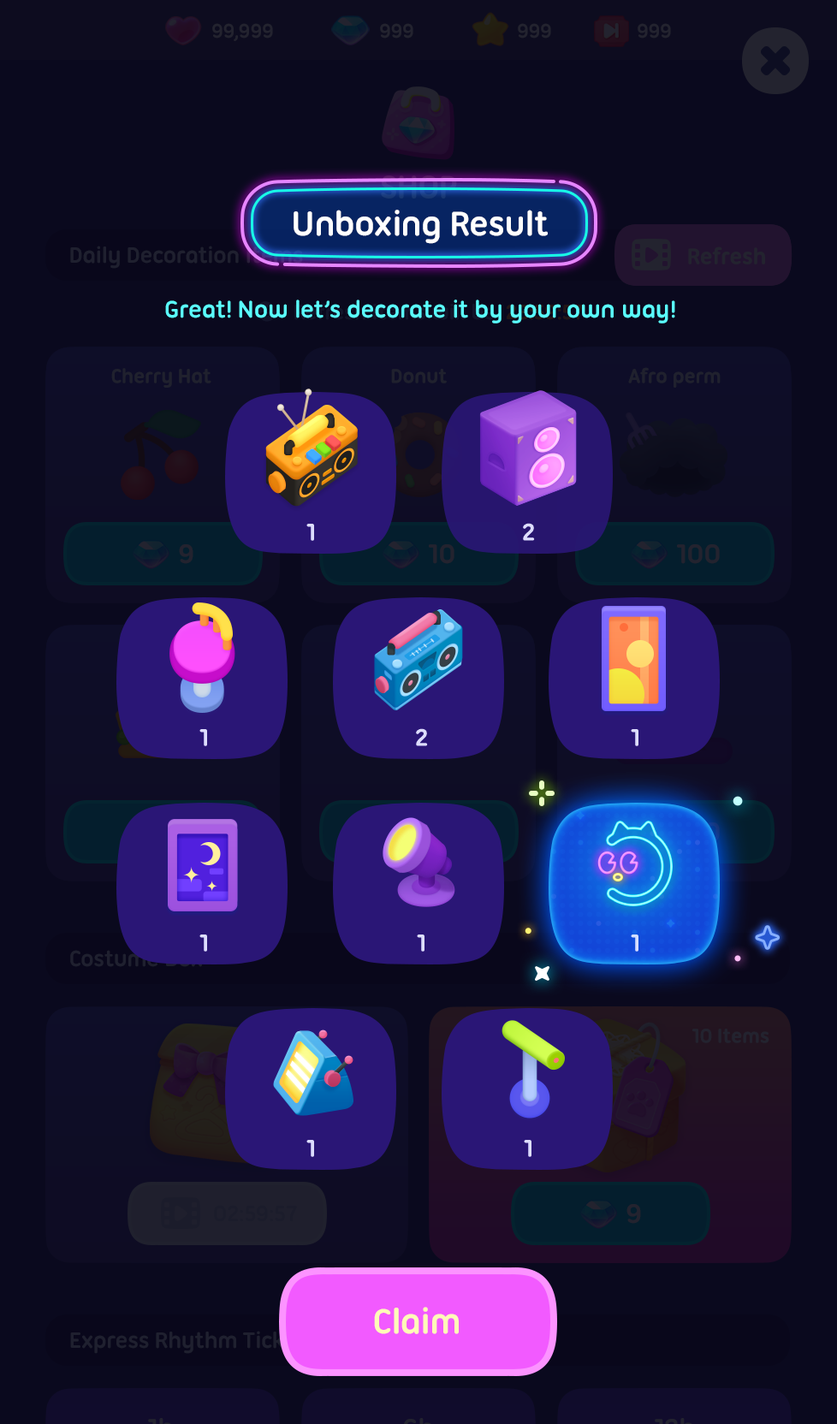
<style>
.page{position:relative;width:837px;height:1424px;background:#0a091e}
.page>*{position:absolute;margin:0}
.t1{font:36.8px "UbuntuTitling-Bold";letter-spacing:-0.025em;color:#ffffff}
.t2{font:25.7px "UbuntuTitling-Bold";letter-spacing:-0.025em;color:#5afdff}
.t3{font:25.7px "UbuntuTitling-Bold";letter-spacing:-0.025em;color:#ddddff}
.t4{font:25.7px "UbuntuTitling-Bold";letter-spacing:-0.025em;color:#d6deff}
.t5{font:37.7px "UbuntuTitling-Bold";letter-spacing:-0.025em;color:#fefbb7}
</style>
<div class="page">
<p class="t1" style="left:294px;top:210px;width:254px;height:34px">Unboxing Result</p>
<p class="t2" style="left:165px;top:300px;width:510px;height:24px">Great! Now let’s decorate it by your own way!</p>
<p class="t3" style="left:306px;top:524px;width:8px;height:17px">1</p>
<p class="t3" style="left:523px;top:523px;width:12px;height:18px">2</p>
<p class="t3" style="left:199px;top:729px;width:8px;height:17px">1</p>
<p class="t3" style="left:416px;top:728px;width:12px;height:18px">2</p>
<p class="t3" style="left:631px;top:729px;width:8px;height:17px">1</p>
<p class="t3" style="left:199px;top:935px;width:8px;height:17px">1</p>
<p class="t3" style="left:417px;top:935px;width:8px;height:17px">1</p>
<p class="t4" style="left:631px;top:935px;width:8px;height:17px">1</p>
<p class="t3" style="left:306px;top:1140px;width:8px;height:17px">1</p>
<p class="t3" style="left:524px;top:1140px;width:8px;height:17px">1</p>
<p class="t5" style="left:374px;top:1307px;width:85px;height:27px">Claim</p>
</div>
